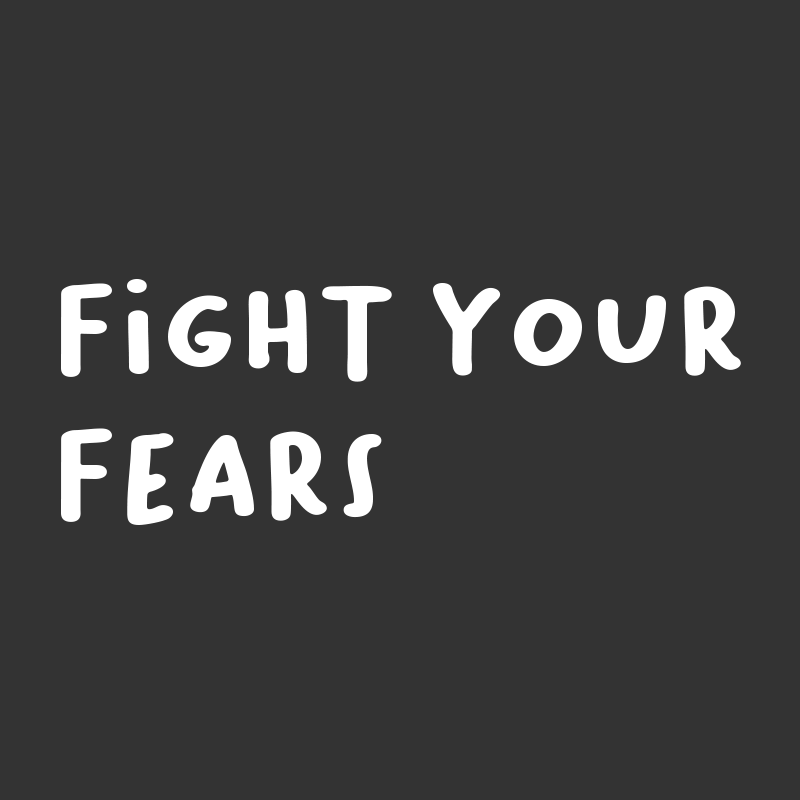
<style>
.page{position:relative;width:800px;height:800px;background:#333333}
.page>*{position:absolute;margin:0}
.t1{font:120.5px "BaksoSapi";color:#ffffff}
</style>
<div class="page">
<p class="t1" style="left:61px;top:279px;width:680px;height:246px">Fight Your<br>Fears</p>
</div>
